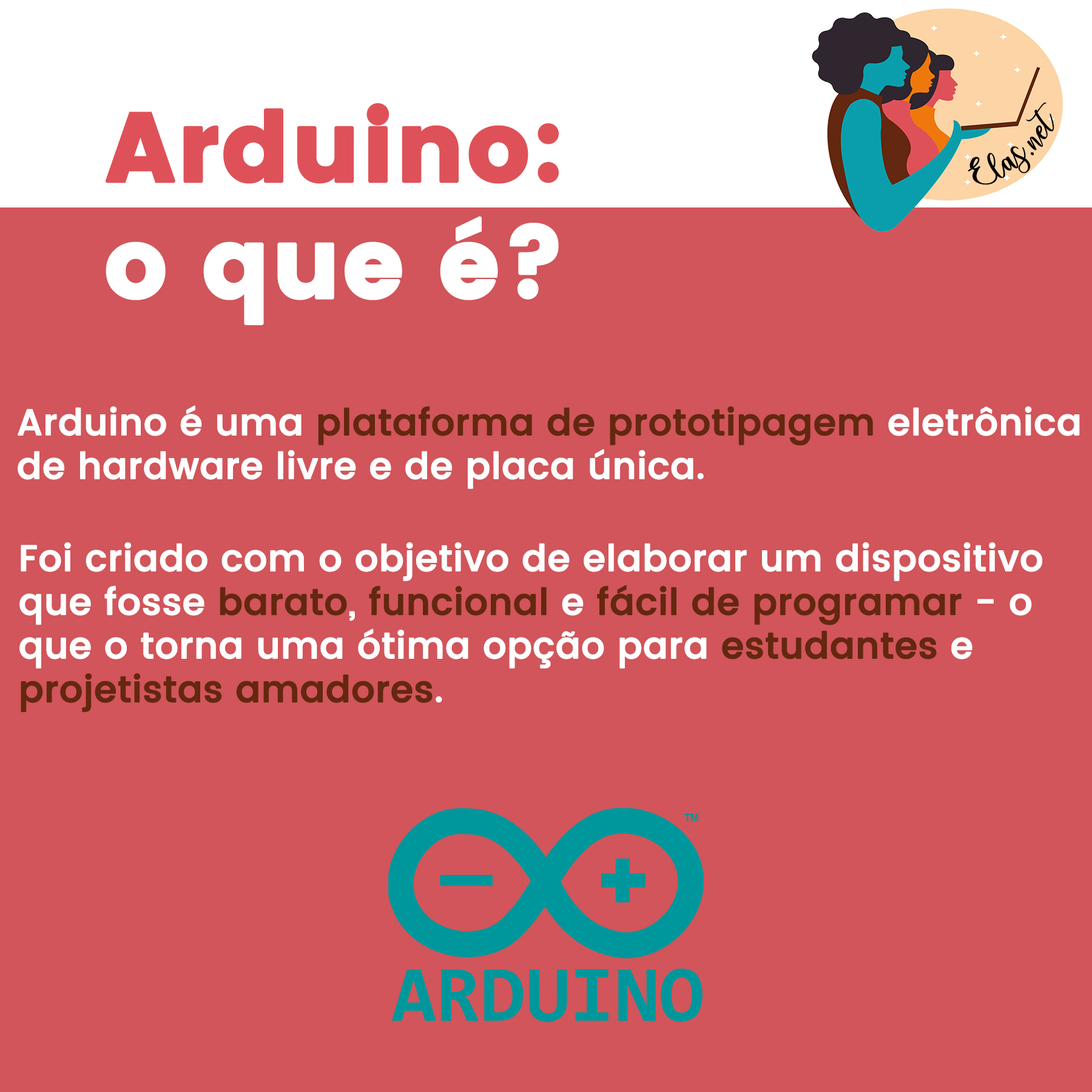
<style>
.page{position:relative;width:1092px;height:1092px;background:#d1555a}
.page>*{position:absolute;margin:0}
.t1{font:24.1px "charlinda-Regular";color:#000000;scale:1.18 1}
.t2{font:36.4px "Poppins-Medium";color:#ffffff;font-weight:bold}
.t3{font:36.4px "Poppins-Medium";color:#64270f;font-weight:bold}
</style>
<div class="page">
<p class="t1" style="left:968px;top:103px;width:86px;height:82px;rotate:-41deg">Elas.net</p>
<p class="t2" style="left:18px;top:405px;width:1062px;height:84px">Arduino é uma <span class="t3">plataforma de prototipagem</span> eletrônica<br>de hardware livre e de placa única.</p>
<p class="t2" style="left:19px;top:542px;width:1023px;height:170px">Foi criado com o objetivo de elaborar um dispositivo <br>que fosse <span class="t3">barato</span>, <span class="t3">funcional </span>e<span class="t3"> fácil de programar</span> - o <br>que o torna uma ótima opção para<span class="t3"> estudantes </span>e<span class="t3"> <br>projetistas amadores</span>.</p>
</div>
